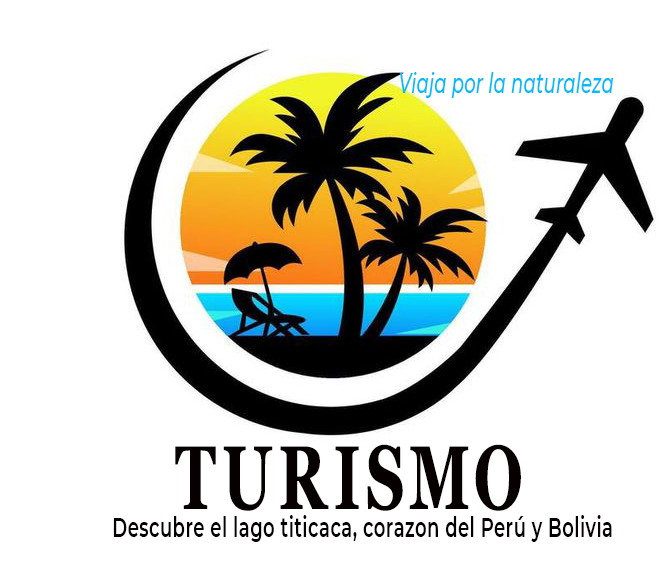
<style>
.page{position:relative;width:672px;height:561px;background:#ffffff}
.page>*{position:absolute;margin:0}
.t1{font:27px "Montserrat-MediumItalic";letter-spacing:0.01em;color:#07b9f9;scale:0.67 1}
.t2{font:90px "Georgia-Bold";letter-spacing:0.1em;color:#070000;scale:0.67 1}
.t3{font:27px "Montserrat-SemiBold";letter-spacing:0.025em;color:#070000;scale:0.67 1}
</style>
<div class="page">
<p class="t1" style="left:400px;top:72px;width:214px;height:26px">Viaja por la naturaleza</p>
<p class="t2" style="left:175px;top:444px;width:346px;height:67px">TURISMO</p>
<p class="t3" style="left:113px;top:515px;width:499px;height:27px">Descubre el lago titicaca, corazon del Perú y Bolivia</p>
</div>
